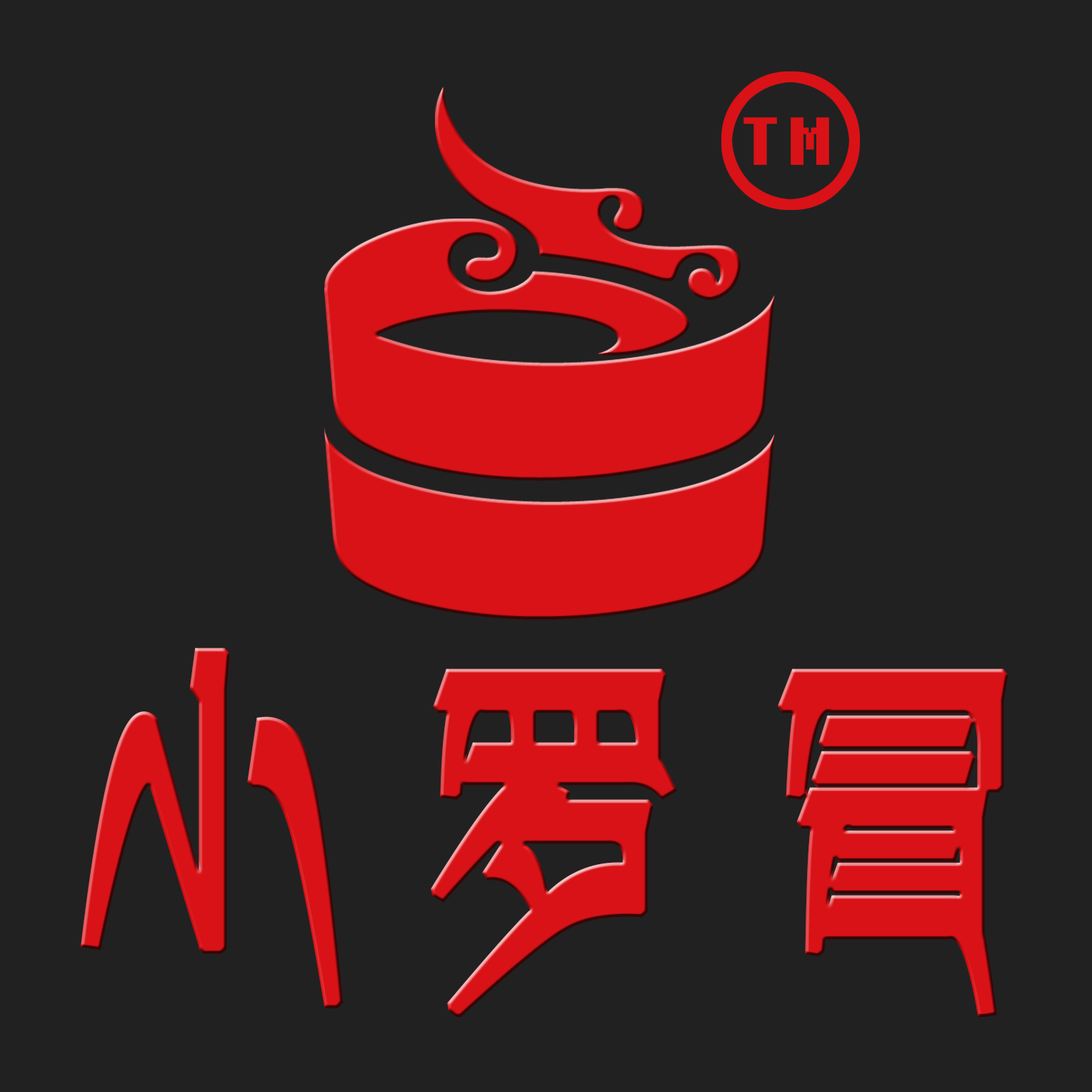
<style>
.page{position:relative;width:1092px;height:1092px;background:#212121}
.page>*{position:absolute;margin:0}
.t1{font:81.8px "Fixedsys";letter-spacing:0.075em;color:#d91217;text-transform:uppercase;font-weight:bold}
.t2{font:376.4px "-";letter-spacing:0.075em;color:#d91217;text-transform:uppercase;font-weight:bold}
</style>
<div class="page">
<p class="t1" style="left:743px;top:117px;width:86px;height:48px">TM</p>
<p class="t2" style="left:81px;top:648px;width:927px;height:369px">小罗冒</p>
</div>
